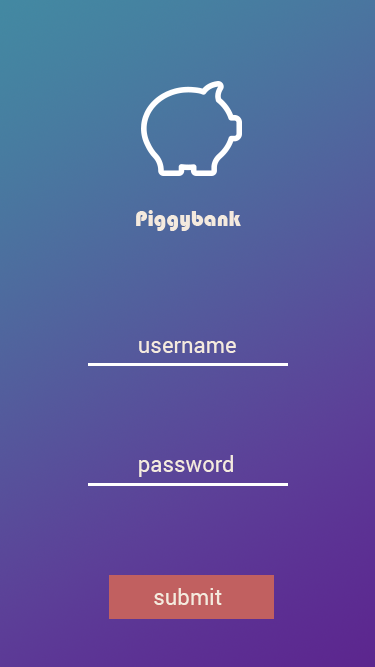
<style>
.page{position:relative;width:375px;height:667px}
.page>*{position:absolute;margin:0}
.t1{font:22px "Bauhaus93";color:#f4eade}
.t2{font:22px "Roboto-Regular";color:#f4eade}
</style>
<div class="page">
<p class="t1" style="left:136px;top:210px;width:105px;height:21px">Piggybank</p>
<p class="t2" style="left:139px;top:341px;width:97px;height:12px">username</p>
<p class="t2" style="left:139px;top:455px;width:94px;height:22px">password</p>
<p class="t2" style="left:154px;top:588px;width:68px;height:17px">submit</p>
</div>
